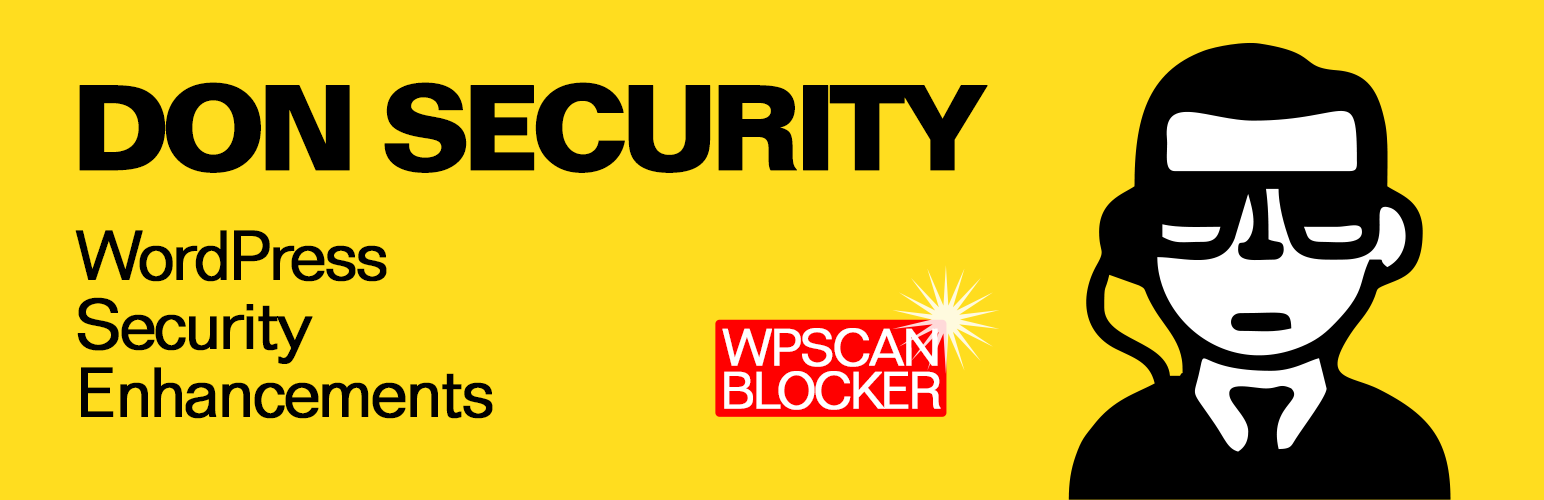
<style>
.page{position:relative;width:1544px;height:500px;background:#ffdd1f}
.page>*{position:absolute;margin:0}
.t1{font:118.4px "FolioBT-Bold";letter-spacing:-0.1em;color:#000000;font-weight:bold}
.t2{font:68.5px/68.5px "FolioBT-Light";letter-spacing:-0.05em;color:#000000;font-weight:bold}
.t3{font:50.7px "FolioBT-Light";letter-spacing:-0.05em;color:#ffffff;font-weight:bold}
.t4{font:50.7px "FolioBT-Light";letter-spacing:-0.075em;color:#ffffff;font-weight:bold}
</style>
<div class="page">
<p class="t1" style="left:79px;top:82px;width:909px;height:91px">DON SECURITY</p>
<p class="t2" style="left:75px;top:230px;width:418px;height:189px">WordPress<br>Security<br>Enhancements</p>
<p class="t3" style="left:722px;top:328px;width:216px;height:39px">WPSCAN</p>
<p class="t4" style="left:724px;top:371px;width:217px;height:39px">BLOCKER</p>
</div>
